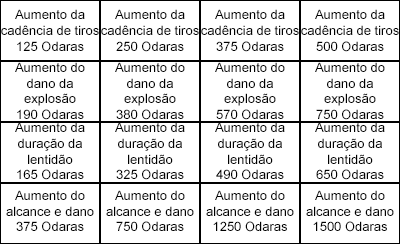
<style>
.page{position:relative;width:400px;height:244px;background:#ffffff}
.page>*{position:absolute;margin:0}
.t1{font:13px "ArialMT";color:#000000}
</style>
<div class="page">
<p class="t1" style="left:1px;top:9px;width:98px;height:43px;text-align:center">Aumento da cadência de tiros<br>125 Odaras</p>
<p class="t1" style="left:101px;top:9px;width:98px;height:43px;text-align:center">Aumento da cadência de tiros<br>250 Odaras</p>
<p class="t1" style="left:201px;top:9px;width:98px;height:43px;text-align:center">Aumento da cadência de tiros<br>375 Odaras</p>
<p class="t1" style="left:301px;top:9px;width:98px;height:43px;text-align:center">Aumento da cadência de tiros<br>500 Odaras</p>
<p class="t1" style="left:15px;top:62px;width:70px;height:58px;text-align:center">Aumento do dano da explosão<br>190 Odaras</p>
<p class="t1" style="left:115px;top:62px;width:70px;height:58px;text-align:center">Aumento do dano da explosão<br>380 Odaras</p>
<p class="t1" style="left:215px;top:62px;width:70px;height:58px;text-align:center">Aumento do dano da explosão<br>570 Odaras</p>
<p class="t1" style="left:315px;top:62px;width:70px;height:58px;text-align:center">Aumento do dano da explosão<br>750 Odaras</p>
<p class="t1" style="left:15px;top:122px;width:70px;height:58px;text-align:center">Aumento da duração da lentidão <br>165 Odaras</p>
<p class="t1" style="left:115px;top:122px;width:70px;height:58px;text-align:center">Aumento da duração da lentidão <br>325 Odaras</p>
<p class="t1" style="left:215px;top:122px;width:70px;height:58px;text-align:center">Aumento da duração da lentidão <br>490 Odaras</p>
<p class="t1" style="left:315px;top:122px;width:70px;height:58px;text-align:center">Aumento da duração da lentidão <br>650 Odaras</p>
<p class="t1" style="left:6px;top:190px;width:88px;height:42px;text-align:center">Aumento do alcance e dano<br>375 Odaras</p>
<p class="t1" style="left:106px;top:190px;width:88px;height:42px;text-align:center">Aumento do alcance e dano<br>750 Odaras</p>
<p class="t1" style="left:206px;top:190px;width:88px;height:42px;text-align:center">Aumento do alcance e dano<br>1250 Odaras</p>
<p class="t1" style="left:306px;top:190px;width:88px;height:42px;text-align:center">Aumento do alcance e dano<br>1500 Odaras</p>
</div>
